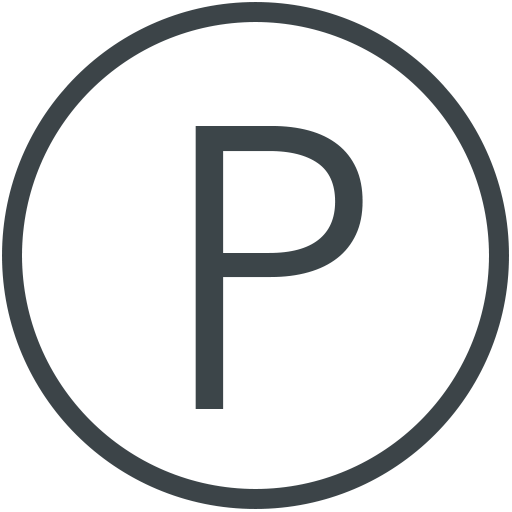
<style>
.page{position:relative;width:512px;height:512px;background:#ffffff}
.page>*{position:absolute;margin:0}
.t1{font:400px "AvenirNext-Regular";color:#3c4549;scale:0.95 1}
</style>
<div class="page">
<p class="t1" style="left:195px;top:126px;width:168px;height:283px">P</p>
</div>
